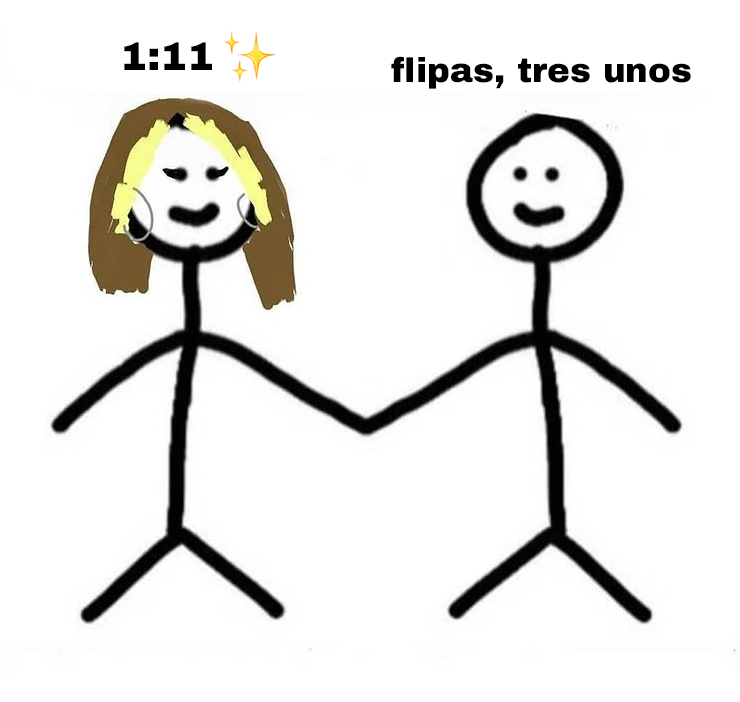
<style>
.page{position:relative;width:740px;height:702px;background:#ffffff}
.page>*{position:absolute;margin:0}
.t1{font:40px "ArchivoBlack-Regular";color:#000000}
.t2{font:34.2px "ArchivoBlack-Regular";color:#000000}
</style>
<div class="page">
<p class="t1" style="left:124px;top:42px;width:88px;height:28px">1:11</p>
<p class="t2" style="left:391px;top:56px;width:300px;height:33px">flipas, tres unos</p>
</div>
